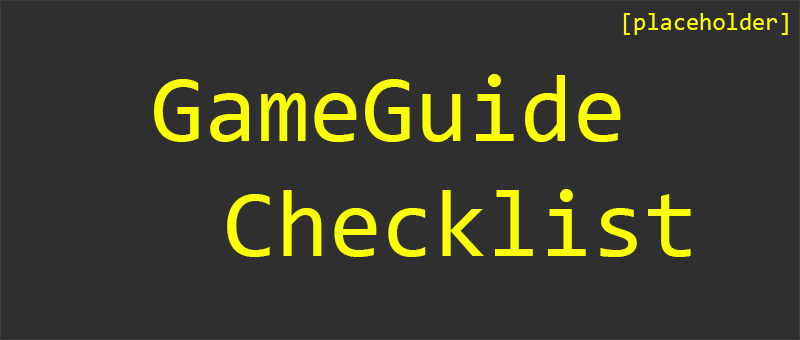
<style>
.page{position:relative;width:800px;height:340px;background:#2f2f2f}
.page>*{position:absolute;margin:0}
.t1{font:24px "Consolas";color:#fcff01}
.t2{font:96px "Consolas";color:#fcff01}
</style>
<div class="page">
<p class="t1" style="left:623px;top:13px;width:165px;height:22px">[placeholder]</p>
<p class="t2" style="left:154px;top:74px;width:537px;height:183px">GameGuide<br> Checklist</p>
</div>
